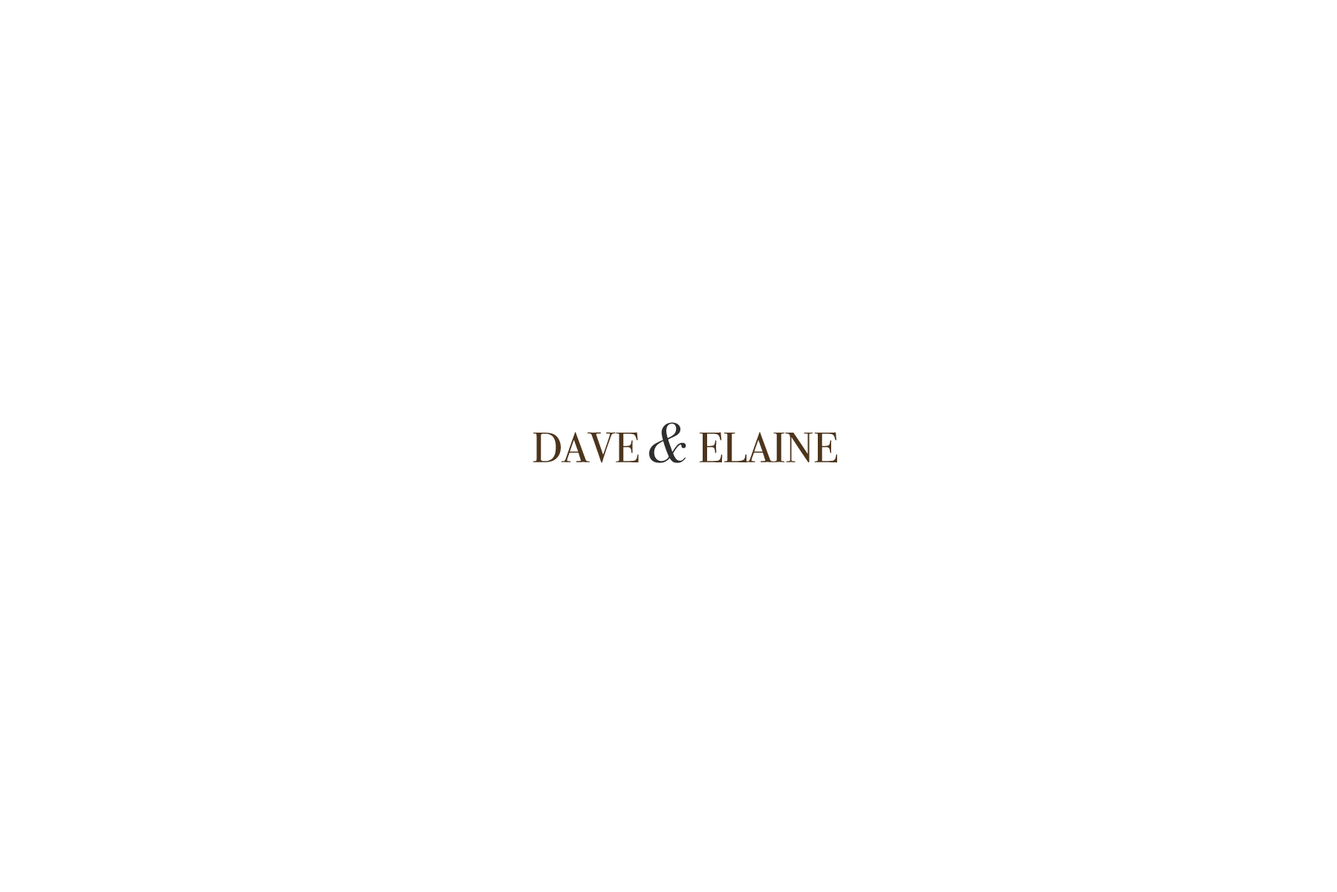
<style>
.page{position:relative;width:1337px;height:892px;background:#ffffff}
.page>*{position:absolute;margin:0}
.t1{font:42.3px "BodoniSvtyTwoOSITCTTBook";color:#4d351d}
.t2{font:55.7px "BodoniSvtyTwoOSITCTTBookIt";color:#2e2e2d}
</style>
<div class="page">
<p class="t1" style="left:533px;top:422px;width:304px;height:41px">DAVE <span class="t2">&amp; </span>ELAINE</p>
</div>
